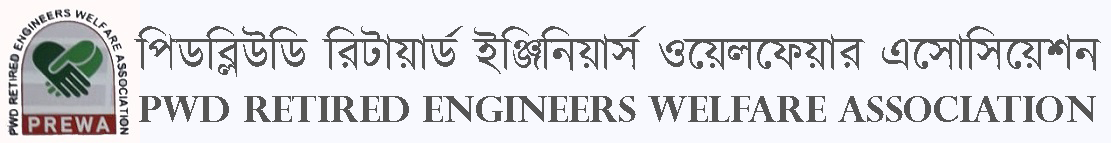
<style>
.page{position:relative;width:1111px;height:143px;background:#f8f9fe}
.page>*{position:absolute;margin:0}
.t1{font:48px "Kalpurush";color:#555555}
.t2{font:36px "SiyamRupaliANSI";color:#555555}
.t3{font:36px "PerpetuaTitlingMT-Bold";color:#555555}
</style>
<div class="page">
<p class="t1" style="left:134px;top:26px;width:967px;height:51px"><span class="t2"><br></span>পিডব্লিউডি রিটায়ার্ড ইঞ্জিনিয়ার্স ওয়েলফেয়ার এসোসিয়েশন</p>
<p class="t3" style="left:139px;top:96px;width:957px;height:26px">PWD RETIRED ENGINEERS WELFARE ASSOCIATION</p>
</div>
